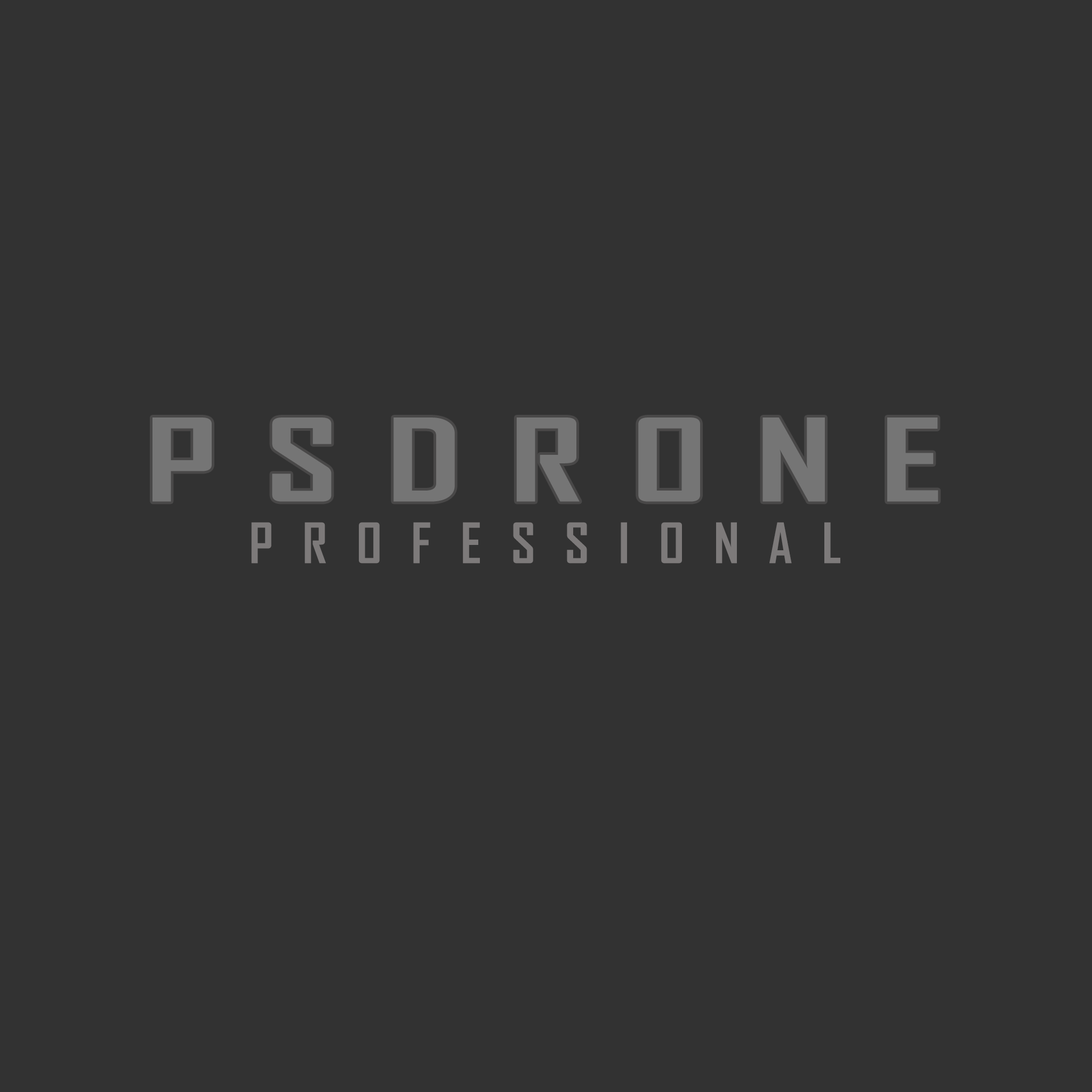
<style>
.page{position:relative;width:1092px;height:1092px;background:#323232}
.page>*{position:absolute;margin:0}
.t1{font:109.7px "AgencyFB-Bold";letter-spacing:0.3em;color:#757575;scale:1.46 1}
.t2{font:53.3px "AgencyFB-Bold";letter-spacing:0.55em;color:#7d7a7a}
</style>
<div class="page">
<p class="t1" style="left:152px;top:417px;width:786px;height:85px">PSDRONE</p>
<p class="t2" style="left:251px;top:522px;width:589px;height:42px">PROFESSIONAL</p>
</div>
